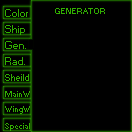
<style>
.page{position:relative;width:132px;height:132px;background:#000000}
.page>*{position:absolute;margin:0}
.t1{font:10px "Small Fonts";color:#31af00}
.t2{font:8px "Small Fonts";color:#31af00}
.t3{font:9px "Small Fonts";color:#31af00}
</style>
<div class="page">
<p class="t1" style="left:5px;top:9px;width:23px;height:8px">Color</p>
<p class="t2" style="left:55px;top:8px;width:50px;height:6px">GENERATOR</p>
<p class="t1" style="left:5px;top:25px;width:20px;height:10px">Ship</p>
<p class="t1" style="left:5px;top:41px;width:21px;height:8px">Gen.</p>
<p class="t1" style="left:5px;top:57px;width:20px;height:8px">Rad.</p>
<p class="t3" style="left:5px;top:74px;width:24px;height:7px">Sheild</p>
<p class="t2" style="left:5px;top:91px;width:25px;height:6px">MainW</p>
<p class="t2" style="left:5px;top:123px;width:25px;height:8px">Special</p>
</div>
